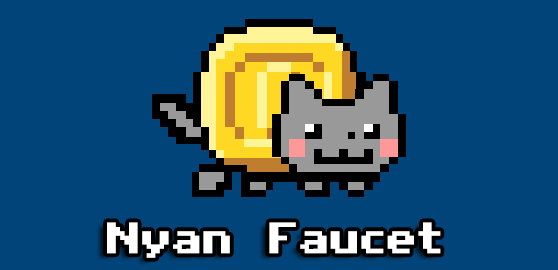
<style>
.page{position:relative;width:558px;height:270px;background:#014479}
.page>*{position:absolute;margin:0}
.t1{font:35px "AmigaForeverPro2";color:#ffffff}
</style>
<div class="page">
<p class="t1" style="left:107px;top:222px;width:334px;height:36px">Nyan Faucet</p>
</div>
